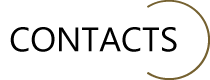
<style>
.page{position:relative;width:210px;height:80px;background:#ffffff}
.page>*{position:absolute;margin:0}
.t1{font:34px "SegoeUI";color:#000000}
</style>
<div class="page">
<p class="t1" style="left:10px;top:27px;width:167px;height:25px">CONTACTS</p>
</div>
